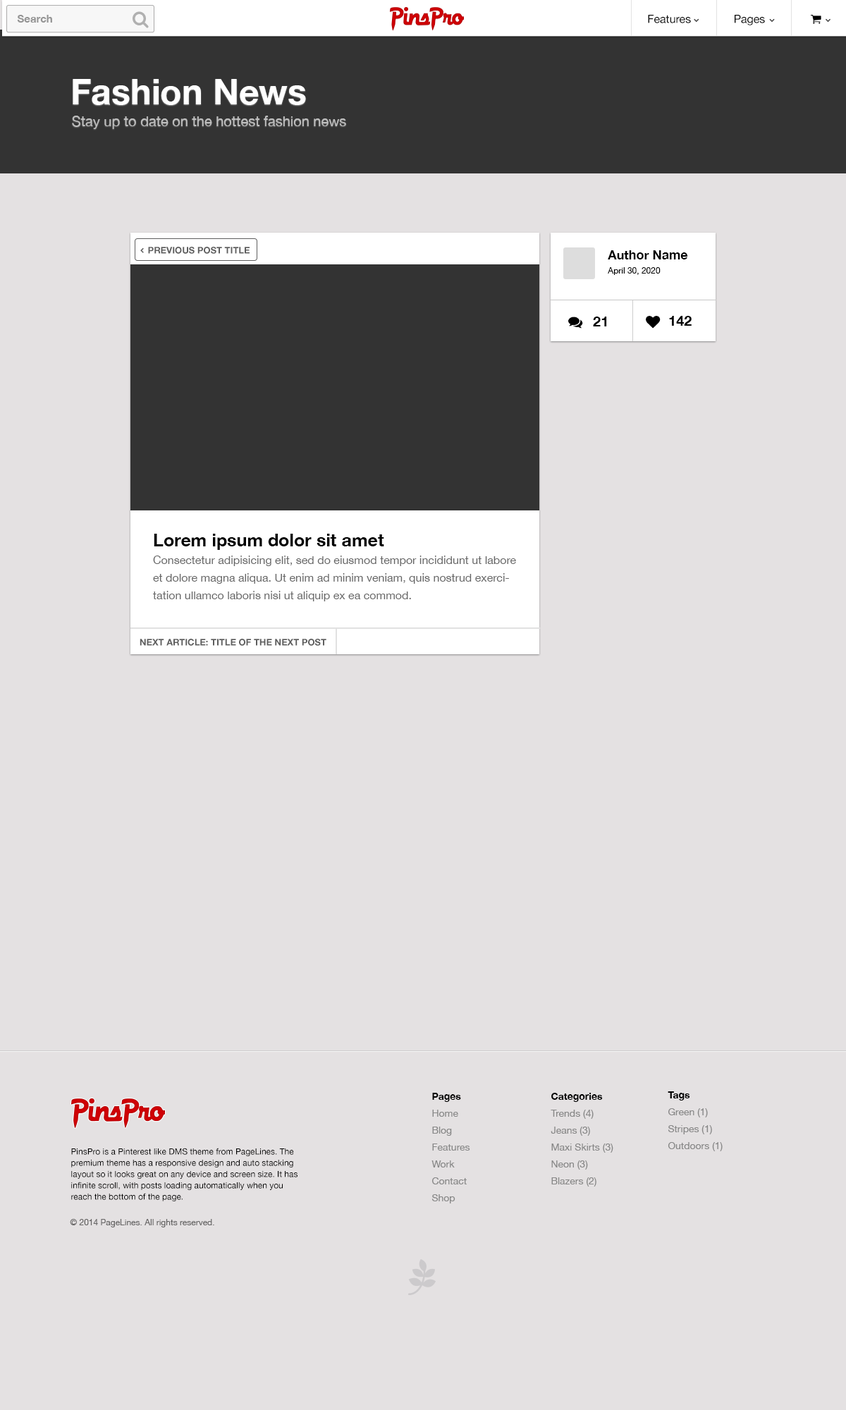
<style>
.page{position:relative;width:846px;height:1410px;background:#e4e1e2}
.page>*{position:absolute;margin:0}
.t1{font:10.6px "HelveticaNeue-Bold";color:#959595}
.t2{font:35.4px "HelveticaNeue-Bold";color:#ffffff}
.t3{font:14.2px "HelveticaNeue";color:#bfbfbf}
.t4{font:12.7px "HelveticaNeue-Bold";color:#000000}
.t5{font:8.5px "HelveticaNeue";color:#000000}
.t6{font:14.1px "HelveticaNeue-Bold";color:#000000}
.t7{font:11.3px/17.6px "HelveticaNeue";color:#666666}
.t8{font:17.6px/9.9px "HelveticaNeue-Bold";color:#000000}
.t9{font:9.2px "HelveticaNeue-Bold";color:#5d5d5d;text-transform:uppercase}
.t10{font:9.9px/16.9px "MyriadPro-Regular";color:#888888}
.t11{font:9.9px/16.9px "MyriadPro-Regular";color:#000000}
.t12{font:8.5px "MyriadPro-Regular";color:#666565}
</style>
<div class="page">
<p class="t1" style="left:17px;top:15px;width:35px;height:8px">Search</p>
<p class="t2" style="left:73px;top:79px;width:233px;height:26px">Fashion News</p>
<p class="t3" style="left:72px;top:116px;width:274px;height:13px">Stay up to date on the hottest fashion news</p>
<p class="t4" style="left:608px;top:250px;width:79px;height:9px">Author Name</p>
<p class="t5" style="left:608px;top:267px;width:52px;height:8px">April 30, 2020</p>
<p class="t6" style="left:593px;top:316px;width:14px;height:10px">21</p>
<p class="t6" style="left:669px;top:316px;width:22px;height:10px">142</p>
<p class="t7" style="left:153px;top:534px;width:363px;height:67px"><span class="t8">Lorem ipsum dolor sit amet <br></span>Consectetur adipisicing elit, sed do eiusmod tempor incididunt ut labore et dolore magna aliqua. Ut enim ad minim veniam, quis nostrud exercitation ullamco laboris nisi ut aliquip ex ea commod.</p>
<p class="t9" style="left:140px;top:639px;width:186px;height:7px">Next Article: Title of the next post</p>
<p class="t10" style="left:431px;top:1093px;width:39px;height:110px"><span class="t11">Pages<br></span>Home<br>Blog<br>Features<br>Work<br>Contact<br>Shop</p>
<p class="t10" style="left:551px;top:1093px;width:62px;height:93px"><span class="t11">Categories<br></span>Trends (4)<br>Jeans (3)<br>Maxi Skirts (3)<br>Neon (3)<br>Blazers (2)</p>
<p class="t10" style="left:668px;top:1091px;width:54px;height:60px"><span class="t11">Tags<br></span>Green (1)<br>Stripes (1)<br>Outdoors (1)</p>
<p class="t5" style="left:71px;top:1148px;width:226px;height:53px">PinsPro is a Pinterest like DMS theme from PageLines. The premium theme has a responsive design and auto stacking layout so it looks great on any device and screen size. It has infinite scroll, with posts loading automatically when you reach the bottom of the page.</p>
<p class="t12" style="left:70px;top:1219px;width:144px;height:8px">© 2014 PageLines. All rights reserved.</p>
</div>
